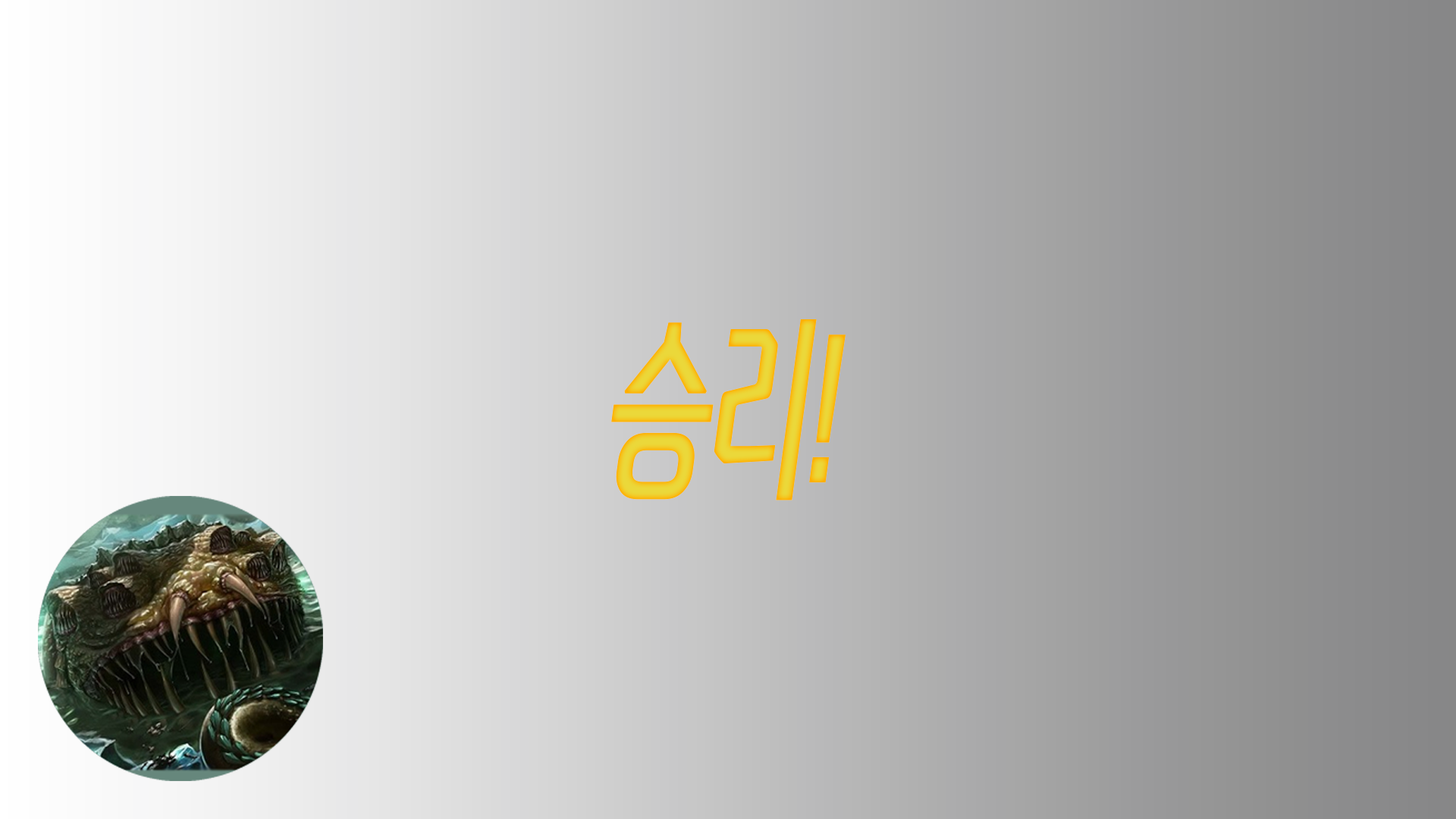
<style>
.page{position:relative;width:1456px;height:819px}
.page>*{position:absolute;margin:0}
.t1{font:205.4px "Koverwatch";color:#ebd83a;font-style:italic;scale:0.77 1}
</style>
<div class="page">
<p class="t1" style="left:611px;top:319px;width:235px;height:181px">승리!</p>
</div>
